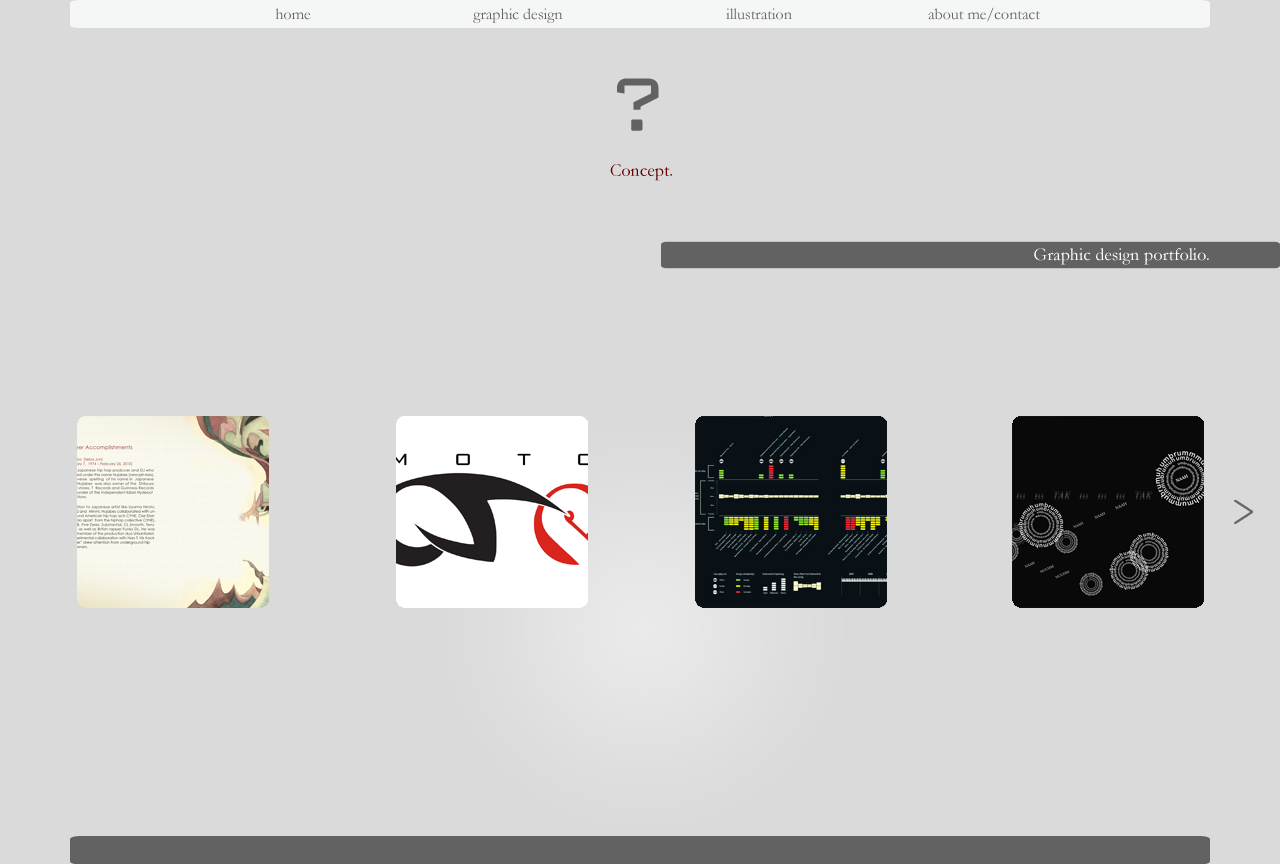
<style>
.page{position:relative;width:1280px;height:864px;background:#dadadb}
.page>*{position:absolute;margin:0}
.t1{font:16px "Garamond";color:#626262}
.t2{font:100.7px "BankGothic-Light";letter-spacing:-0.075em;color:#626262}
.t3{font:18px "Garamond";color:#650000}
.t4{font:18px "Garamond";color:#ffffff}
</style>
<div class="page">
<p class="t1" style="left:275px;top:8px;width:36px;height:12px">home</p>
<p class="t1" style="left:473px;top:8px;width:90px;height:15px">graphic design</p>
<p class="t1" style="left:726px;top:8px;width:66px;height:12px">illustration</p>
<p class="t1" style="left:928px;top:7px;width:112px;height:15px">about me/contact</p>
<p class="t2" style="left:617px;top:78px;width:42px;height:53px">?</p>
<p class="t3" style="left:610px;top:164px;width:62px;height:17px">Concept.</p>
<p class="t4" style="left:1034px;top:248px;width:175px;height:17px">Graphic design portfolio.</p>
</div>
